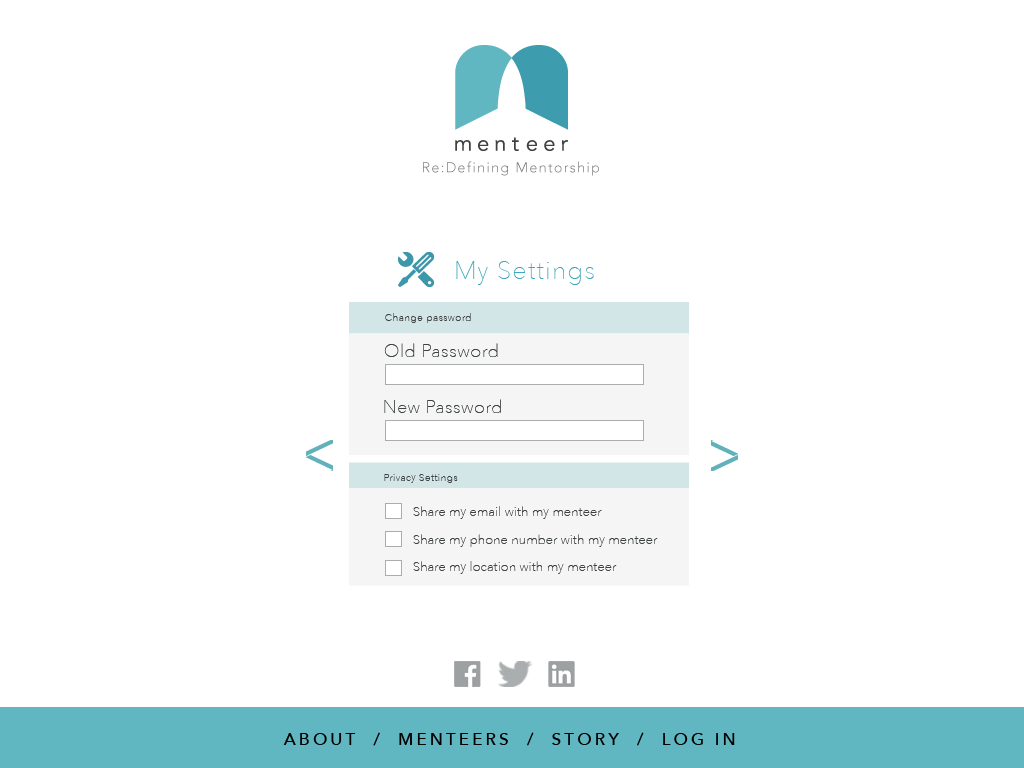
<style>
.page{position:relative;width:1024px;height:768px;background:#ffffff}
.page>*{position:absolute;margin:0}
.t1{font:25px "AvenirNext-UltraLight";letter-spacing:0.05em;color:#3ea8ba}
.t2{font:10.4px "AvenirNext-UltraLight";letter-spacing:0.025em;color:#3e4243}
.t3{font:17.7px "AvenirNext-UltraLight";letter-spacing:0.04em;color:#3e4243}
.t4{font:17.7px "AvenirNext-UltraLight";letter-spacing:0.035em;color:#3e4243}
.t5{font:12.5px "AvenirNext-UltraLight";letter-spacing:0.025em;color:#3e4243}
.t6{font:16.7px "AvenirNext-Medium";letter-spacing:0.2em;color:#000000}
</style>
<div class="page">
<p class="t1" style="left:456px;top:261px;width:138px;height:24px">My Settings</p>
<p class="t2" style="left:385px;top:313px;width:86px;height:10px">Change password</p>
<p class="t3" style="left:384px;top:343px;width:114px;height:14px">Old Password</p>
<p class="t4" style="left:384px;top:399px;width:117px;height:14px">New Password</p>
<p class="t2" style="left:384px;top:474px;width:74px;height:9px">Privacy Settings</p>
<p class="t5" style="left:413px;top:506px;width:189px;height:13px">Share my email with my menteer</p>
<p class="t5" style="left:413px;top:534px;width:245px;height:13px">Share my phone number with my menteer</p>
<p class="t5" style="left:413px;top:561px;width:204px;height:13px">Share my location with my menteer</p>
<p class="t6" style="left:283px;top:732px;width:452px;height:14px">ABOUT  /  MENTEERS  /  STORY  /  LOG IN</p>
</div>
